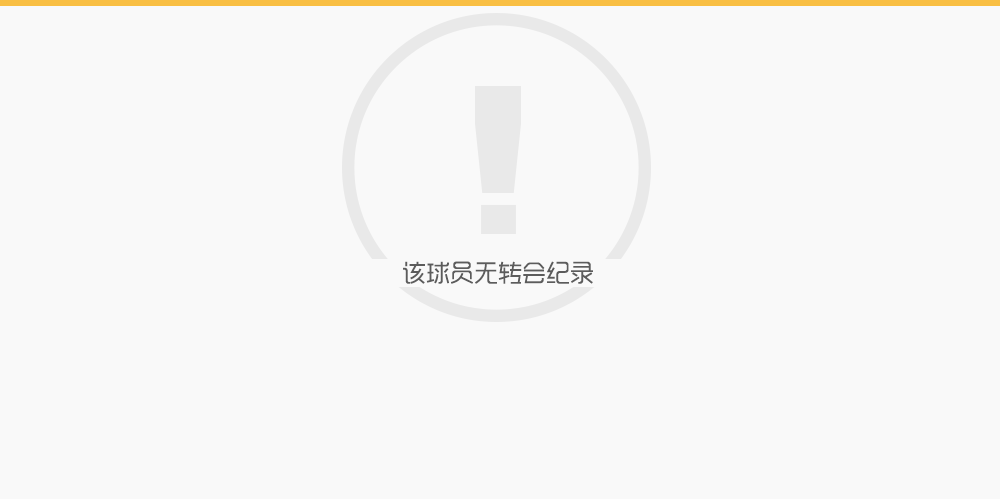
<style>
.page{position:relative;width:1000px;height:499px;background:#f9f9f9}
.page>*{position:absolute;margin:0}
.t1{font:24px "MFYueHei_Noncommercial-Regular";color:#5c5c5c}
</style>
<div class="page">
<p class="t1" style="left:403px;top:261px;width:190px;height:23px">该球员无转会纪录</p>
</div>
